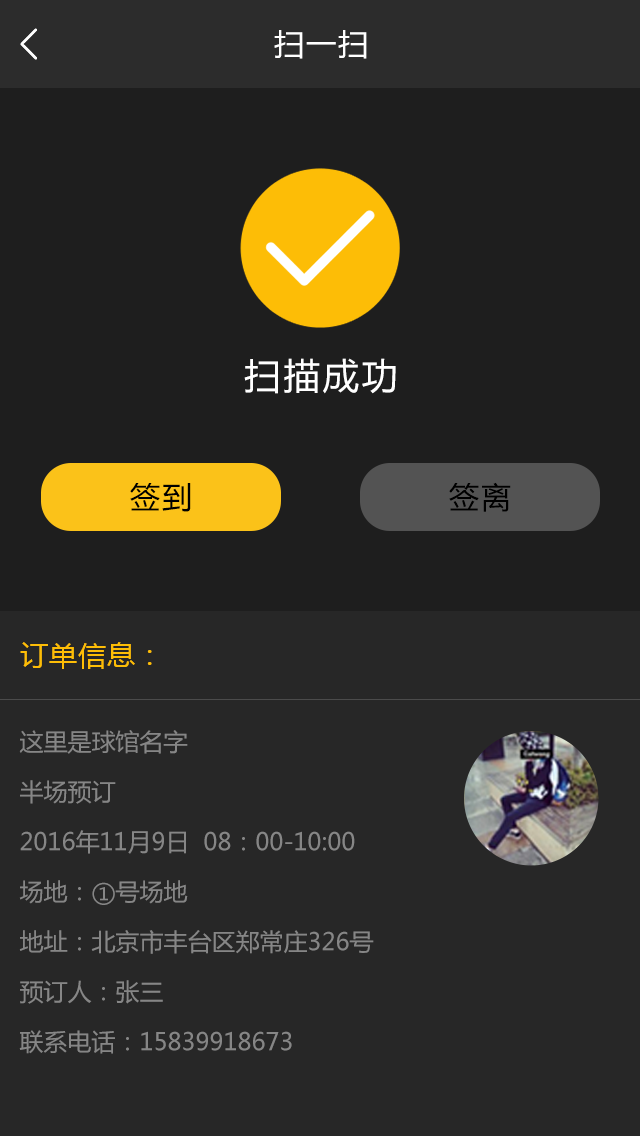
<style>
.page{position:relative;width:640px;height:1136px;background:#272727}
.page>*{position:absolute;margin:0}
.t1{font:30px "MicrosoftYaHei";letter-spacing:0.07em;color:#ffffff}
.t2{font:36px "MicrosoftYaHei";letter-spacing:0.07em;color:#ffffff}
.t3{font:30px "MicrosoftYaHei";letter-spacing:0.07em;color:#000000}
.t4{font:28px "MicrosoftYaHei";letter-spacing:0.03em;color:#fdbd06}
.t5{font:24px/50px "MicrosoftYaHei";color:#868686}
</style>
<div class="page">
<p class="t1" style="left:274px;top:30px;width:93px;height:29px">扫一扫</p>
<p class="t2" style="left:244px;top:358px;width:152px;height:36px">扫描成功</p>
<p class="t3" style="left:130px;top:483px;width:61px;height:29px">签到</p>
<p class="t3" style="left:449px;top:482px;width:62px;height:30px">签离</p>
<p class="t4" style="left:20px;top:642px;width:132px;height:27px">订单信息：</p>
<p class="t5" style="left:19px;top:730px;width:355px;height:324px">这里是球馆名字 <br>半场预订 <br>2016年11月9日  08：00-10:00 <br>场地：①号场地 <br>地址：北京市丰台区郑常庄326号 <br>预订人：张三 <br>联系电话：15839918673</p>
</div>
